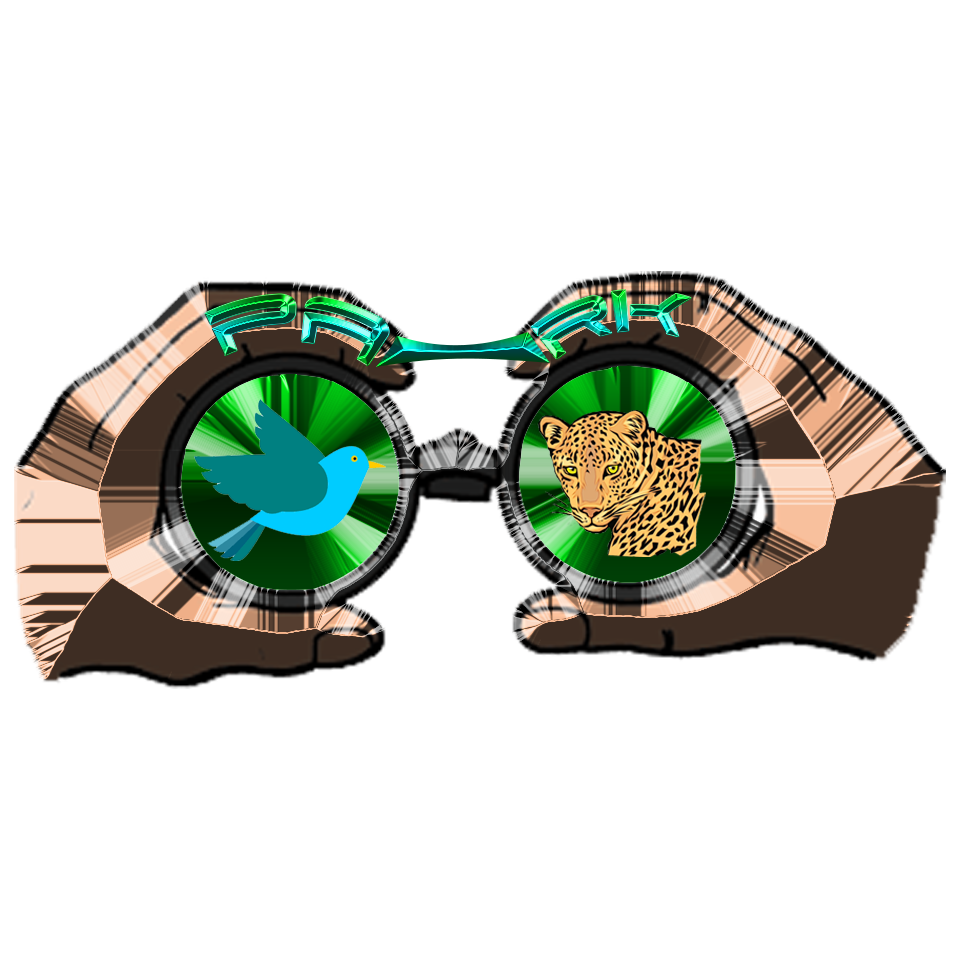
<style>
.page{position:relative;width:960px;height:960px;background:#ffffff}
.page>*{position:absolute;margin:0}
.t1{font:88.7px "DodgerCondensed"}
.t2{font:77.4px "DodgerCondensed"}
</style>
<div class="page">
<p class="t1" style="left:205px;top:294px;width:184px;height:72px;rotate:4deg">PA</p>
<p class="t1" style="left:205px;top:294px;width:184px;height:72px;rotate:4deg">PA</p>
<p class="t2" style="left:531px;top:290px;width:160px;height:69px;rotate:-10deg">RK</p>
<p class="t2" style="left:531px;top:290px;width:160px;height:69px;rotate:-10deg">RK</p>
</div>
